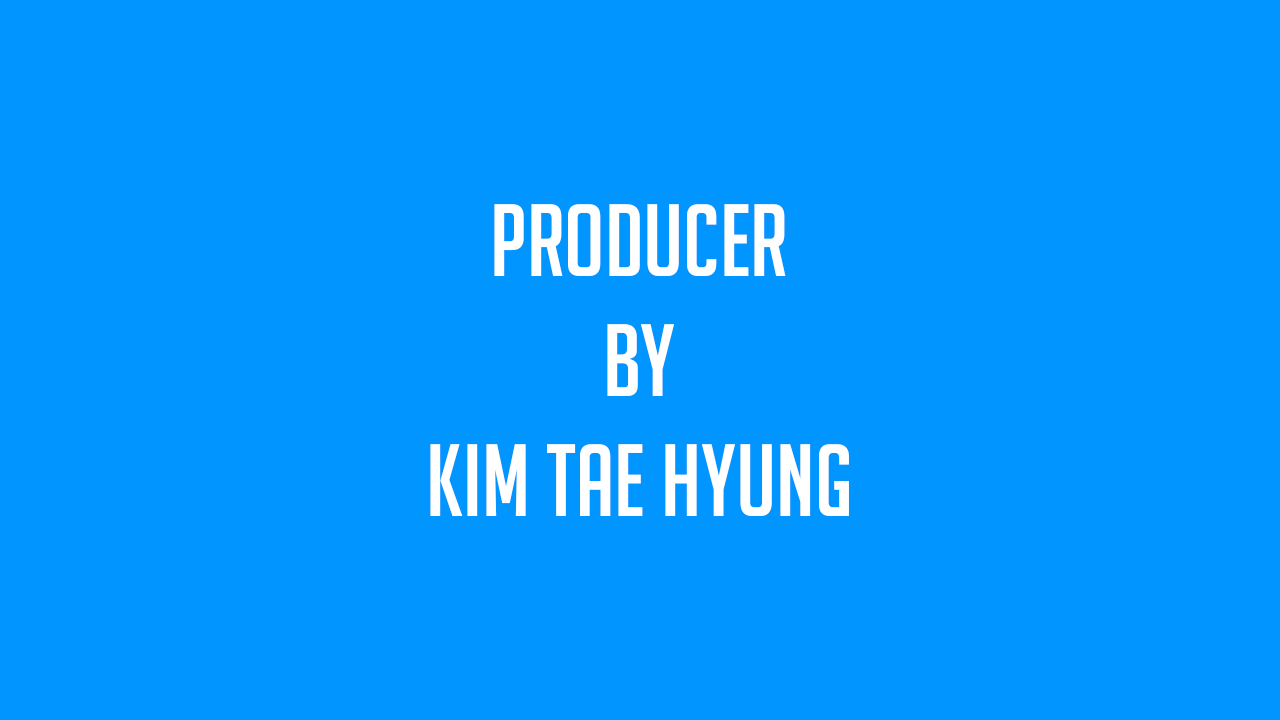
<style>
.page{position:relative;width:1280px;height:720px;background:#0095ff}
.page>*{position:absolute;margin:0}
.t1{font:100px "BigNoodleTitling";color:#ffffff}
.t2{font:300px "BigNoodleTitling";color:#ffffff}
</style>
<div class="page">
<p class="t1" style="left:430px;top:204px;width:419px;height:312px;text-align:center">Producer<br>by<br>Kim tae hyung<br><span class="t2">UNITY 5</span></p>
</div>
